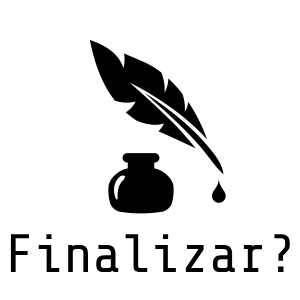
<style>
.page{position:relative;width:300px;height:300px;background:#ffffff}
.page>*{position:absolute;margin:0}
.t1{font:54px "Share-TechMono";color:#000000}
</style>
<div class="page">
<p class="t1" style="left:10px;top:234px;width:280px;height:38px">Finalizar?</p>
</div>
